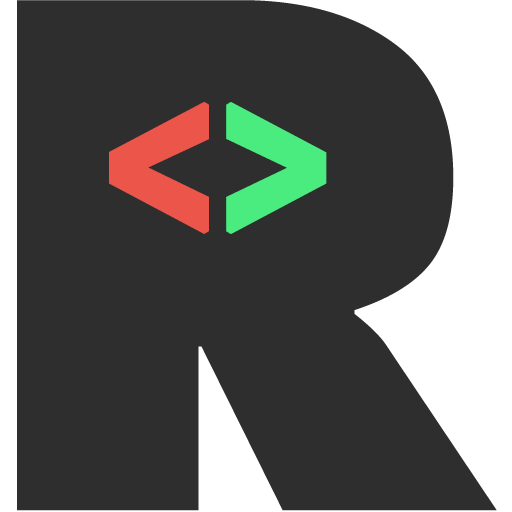
<style>
.page{position:relative;width:512px;height:512px;background:#2e2e2e}
.page>*{position:absolute;margin:0}
.t1{font:676.2px "FuturaLT-ExtraBold";color:#2e2e2e;text-transform:uppercase}
.t2{font:231.8px "ArialNarrow-Bold";color:#ec554a;text-transform:uppercase;font-weight:bold}
.t3{font:231.8px "ArialNarrow-Bold";color:#4aec7f;text-transform:uppercase;font-weight:bold}
</style>
<div class="page">
<p class="t1" style="left:17px;top:0px;width:480px;height:511px">R</p>
<p class="t2" style="left:109px;top:102px;width:218px;height:132px">&lt;<span class="t3">&gt;</span></p>
</div>
